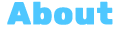
<style>
.page{position:relative;width:120px;height:30px;background:#ffffff}
.page>*{position:absolute;margin:0}
.t1{font:31.4px "Rubik-ExtraBold";letter-spacing:0.02em;color:#4ec7ff;font-weight:bold}
</style>
<div class="page">
<p class="t1" style="left:7px;top:1px;width:106px;height:24px">About</p>
</div>
